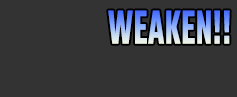
<style>
.page{position:relative;width:237px;height:97px;background:#333333}
.page>*{position:absolute;margin:0}
.t1{font:51.9px "Teko-Semibold";font-weight:bold;scale:0.64 1}
</style>
<div class="page">
<p class="t1" style="left:108px;top:10px;width:122px;height:34px">WEAKEN!!</p>
</div>
